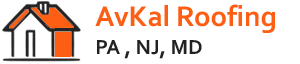
<style>
.page{position:relative;width:300px;height:64px;background:#ffffff}
.page>*{position:absolute;margin:0}
.t1{font:29.7px/27.6px "Corbel-Bold";color:#fe5d14}
.t2{font:21.2px/27.6px "Corbel-Bold";color:#222222}
</style>
<div class="page">
<p class="t1" style="left:95px;top:4px;width:180px;height:55px">AvKal Roofing<br><span class="t2">PA , NJ, MD</span></p>
</div>
